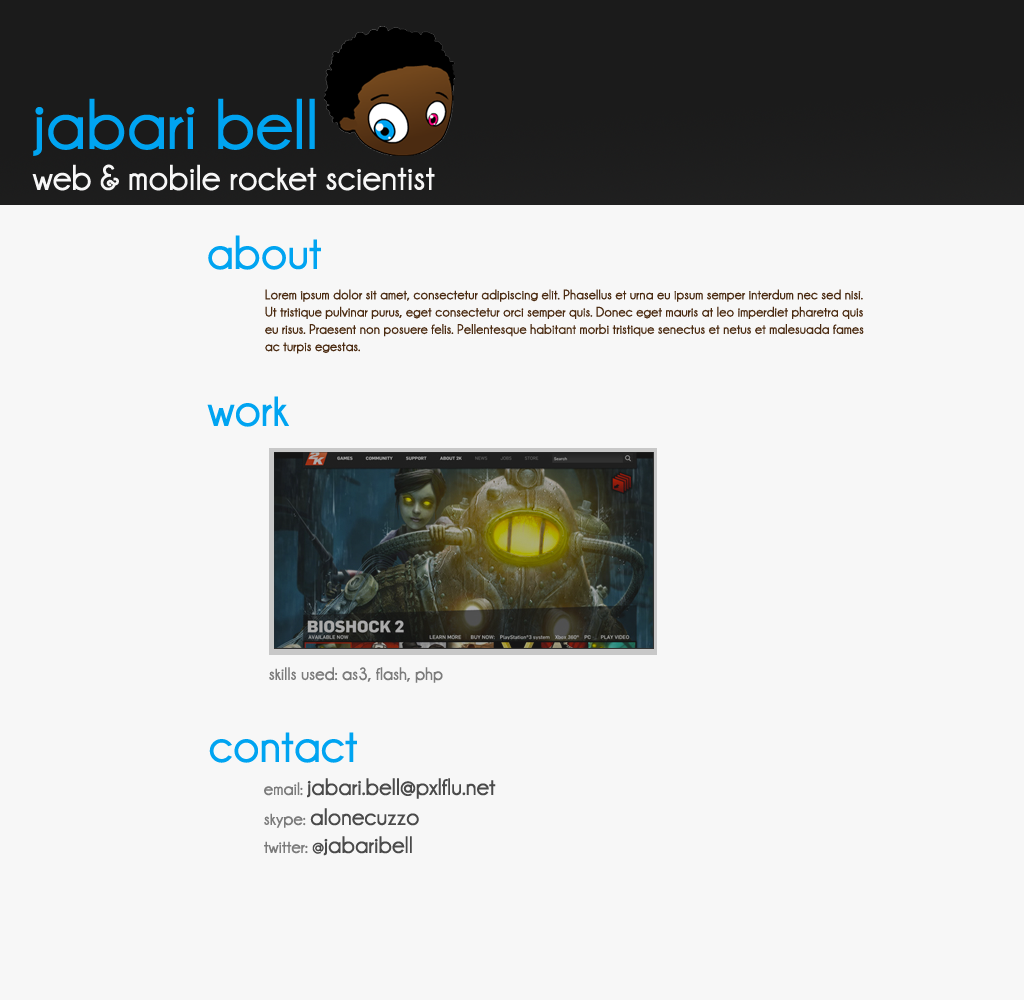
<style>
.page{position:relative;width:1024px;height:1000px;background:#f7f7f7}
.page>*{position:absolute;margin:0}
.t1{font:72px "Champagne&Limousines-Bold";color:#00a4f1}
.t2{font:36px "Champagne&Limousines-Bold";color:#f7f7f7}
.t3{font:48px "Champagne&Limousines-Bold";color:#00a4f1}
.t4{font:14px/17.2px "Champagne&Limousines-Bold";color:#4b2b11}
.t5{font:18px "Champagne&Limousines-Bold";color:#7b7b7b}
.t6{font:24px "Champagne&Limousines-Bold";color:#4a4a4a}
.t7{font:18px "Champagne&Limousines-Bold";color:#4a4a4a}
</style>
<div class="page">
<p class="t1" style="left:33px;top:98px;width:282px;height:58px">jabari bell</p>
<p class="t2" style="left:32px;top:164px;width:403px;height:27px">web &amp; mobile rocket scientist</p>
<p class="t3" style="left:208px;top:235px;width:113px;height:35px">about</p>
<p class="t4" style="left:265px;top:289px;width:599px;height:65px">Lorem ipsum dolor sit amet, consectetur adipiscing elit. Phasellus et urna eu ipsum semper interdum nec sed nisi. <br>Ut tristique pulvinar purus, eget consectetur orci semper quis. Donec eget mauris at leo imperdiet pharetra quis <br>eu risus. Praesent non posuere felis. Pellentesque habitant morbi tristique senectus et netus et malesuada fames <br>ac turpis egestas.</p>
<p class="t3" style="left:207px;top:396px;width:82px;height:31px">work</p>
<p class="t5" style="left:269px;top:667px;width:174px;height:16px">skills used: as3, flash, php</p>
<p class="t3" style="left:209px;top:732px;width:148px;height:31px">contact</p>
<p class="t6" style="left:264px;top:778px;width:232px;height:21px"><span class="t5">email: </span>jabari.bell@pxlflu.net</p>
<p class="t6" style="left:264px;top:808px;width:155px;height:20px"><span class="t5">skype: </span>alonecuzzo</p>
<p class="t6" style="left:264px;top:836px;width:148px;height:20px"><span class="t5">twitter:</span><span class="t7"> @</span>jabaribell</p>
</div>
